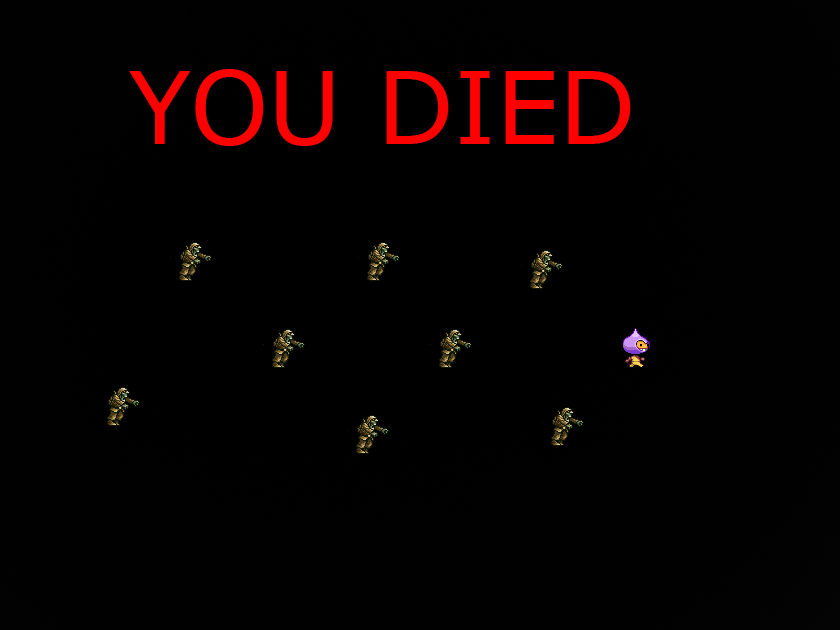
<style>
.page{position:relative;width:840px;height:630px;background:#000000}
.page>*{position:absolute;margin:0}
.t1{font:100px "Verdana";color:#ff0000}
</style>
<div class="page">
<p class="t1" style="left:129px;top:69px;width:502px;height:77px">YOU DIED</p>
</div>
